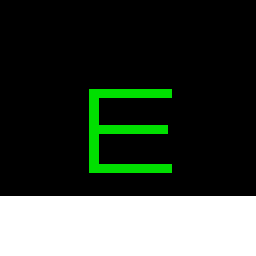
<style>
.page{position:relative;width:256px;height:256px;background:#000000}
.page>*{position:absolute;margin:0}
.t1{font:112px "Michroma";color:#00df00}
</style>
<div class="page">
<p class="t1" style="left:89px;top:89px;width:83px;height:84px">E</p>
</div>
